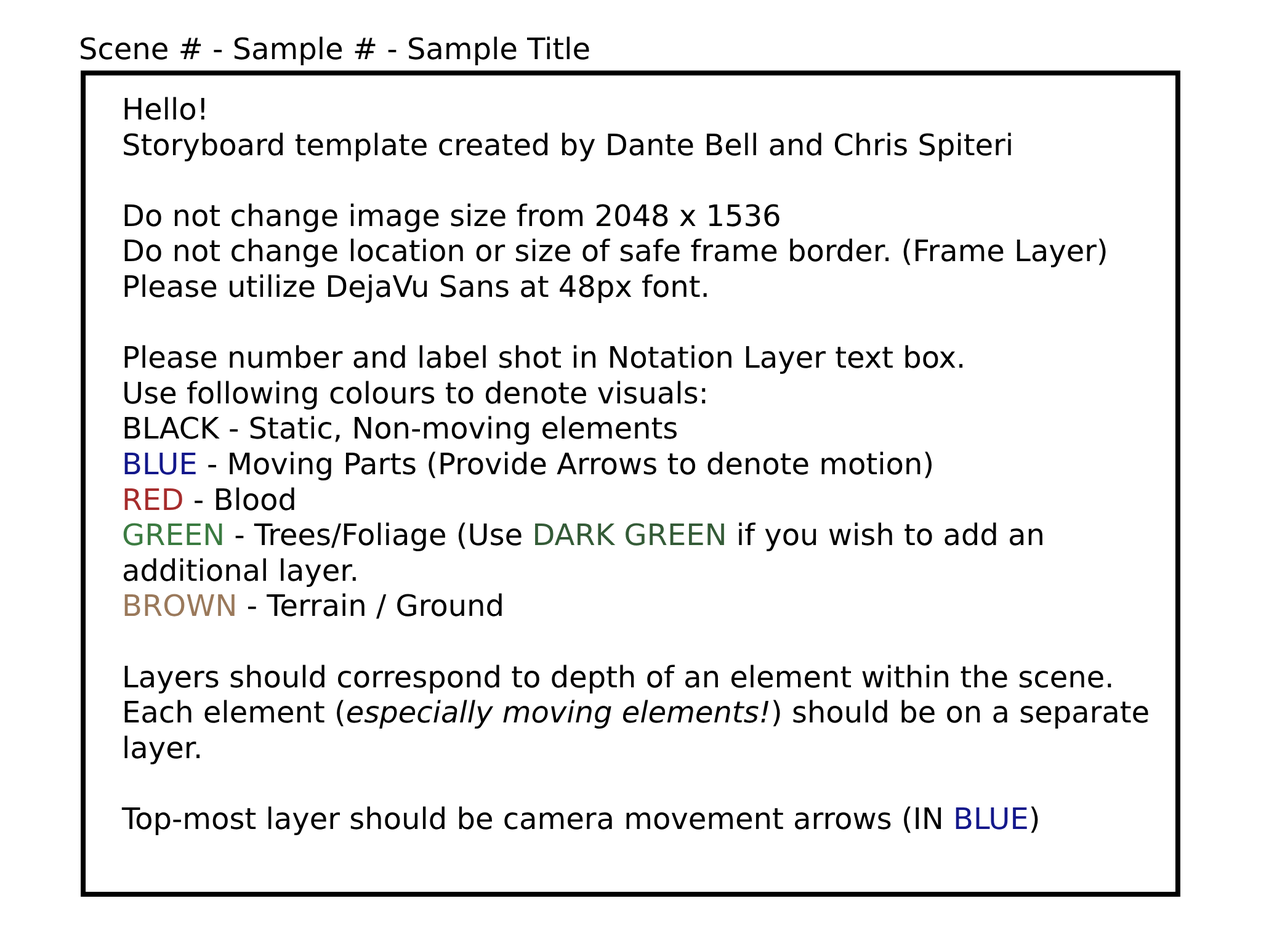
<style>
.page{position:relative;width:1261px;height:946px;background:#ffffff}
.page>*{position:absolute;margin:0}
.t1{font:29.6px "DejaVuSans";color:#000000}
.t2{font:29.6px "DejaVuSans";color:#13188b}
.t3{font:29.6px "DejaVuSans";color:#a62c2c}
.t4{font:29.6px "DejaVuSans";color:#3b7b41}
.t5{font:29.6px "DejaVuSans";color:#345b37}
.t6{font:29.6px "DejaVuSans";color:#9a795b}
.t7{font:29.6px "DejaVuSans-Oblique";color:#000000}
</style>
<div class="page">
<p class="t1" style="left:81px;top:36px;width:508px;height:29px">Scene # - Sample # - Sample Title</p>
<p class="t1" style="left:121px;top:97px;width:1027px;height:738px">Hello!<br>Storyboard template created by Dante Bell and Chris Spiteri<br><br>Do not change image size from 2048 x 1536<br>Do not change location or size of safe frame border. (Frame Layer)<br>Please utilize DejaVu Sans at 48px font.<br><br>Please number and label shot in Notation Layer text box.<br>Use following colours to denote visuals:<br>BLACK - Static, Non-moving elements<br><span class="t2">BLUE </span>- Moving Parts (Provide Arrows to denote motion)<br><span class="t3">RED </span>- Blood<br><span class="t4">GREEN </span>- Trees/Foliage (Use <span class="t5">DARK GREEN </span>if you wish to add an<br>additional layer.<br><span class="t6">BROWN </span>- Terrain / Ground<br><br>Layers should correspond to depth of an element within the scene.<br>Each element (<span class="t7">especially moving elements!</span>) should be on a separate<br>layer.<br><br>Top-most layer should be camera movement arrows (IN <span class="t2">BLUE</span>)</p>
</div>
